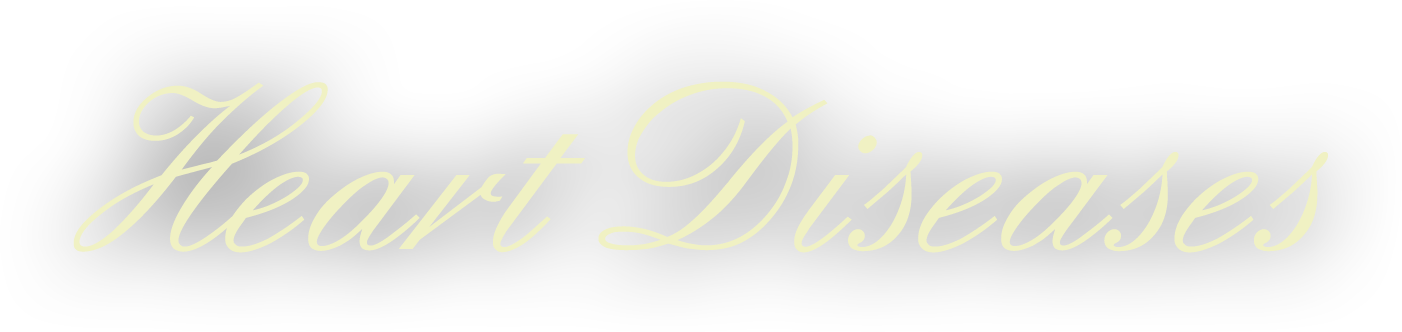
<style>
.page{position:relative;width:1402px;height:332px}
.page>*{position:absolute;margin:0}
.t1{font:253px "English";color:#f0f1c3}
</style>
<div class="page">
<p class="t1" style="left:73px;top:81px;width:1255px;height:172px">Heart Diseases</p>
</div>
